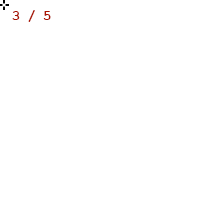
<style>
.page{position:relative;width:200px;height:200px;background:#ffffff}
.page>*{position:absolute;margin:0}
.t1{font:14px "CourierNewPS-BoldMT";letter-spacing:-0.014em;color:#aa1401}
</style>
<div class="page">
<p class="t1" style="left:12px;top:10px;width:39px;height:12px">3 / 5</p>
</div>
